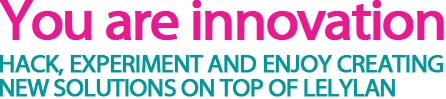
<style>
.page{position:relative;width:446px;height:99px;background:#ffffff}
.page>*{position:absolute;margin:0}
.t1{font:58px "MyriadWebPro";letter-spacing:-0.055em;color:#ea198f;font-weight:bold}
.t2{font:25px/24px "MyriadWebPro";letter-spacing:-0.046em;color:#00979d;font-weight:bold}
</style>
<div class="page">
<p class="t1" style="left:0px;top:0px;width:444px;height:40px">You are innovation</p>
<p class="t2" style="left:0px;top:55px;width:444px;height:42px">HACK, EXPERIMENT AND ENJOY CREATING<br>NEW SOLUTIONS ON TOP OF LELYLAN</p>
</div>
